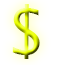
<style>
.page{position:relative;width:60px;height:65px;background:#ffffff}
.page>*{position:absolute;margin:0}
.t1{font:65px "LucidaConsole"}
</style>
<div class="page">
<p class="t1" style="left:12px;top:4px;width:28px;height:55px">$</p>
</div>
